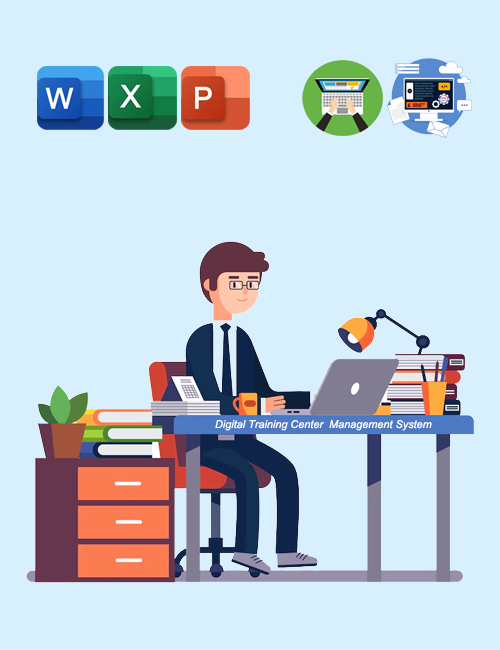
<style>
.page{position:relative;width:500px;height:650px;background:#d8effd}
.page>*{position:absolute;margin:0}
.t1{font:10.9px "Arial-ItalicMT";color:#ffffff}
</style>
<div class="page">
<p class="t1" style="left:215px;top:420px;width:217px;height:11px">Digital Training Center  Management System</p>
</div>
